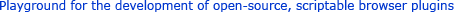
<style>
.page{position:relative;width:454px;height:12px;background:#ffffff}
.page>*{position:absolute;margin:0}
.t1{font:12px "Verdana";color:#0036ce}
</style>
<div class="page">
<p class="t1" style="left:0px;top:0px;width:454px;height:12px">Playground for the development of open-source, scriptable browser plugins</p>
</div>
